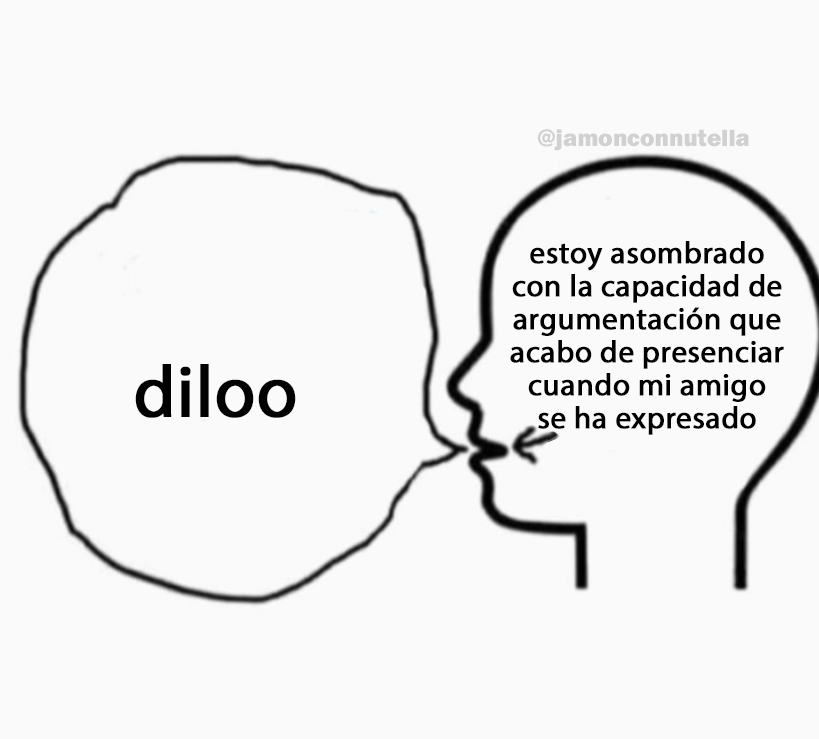
<style>
.page{position:relative;width:819px;height:739px;background:#fafafa}
.page>*{position:absolute;margin:0}
.t1{font:24.5px "FranklinGothic-Heavy";color:#d1d1d1}
.t2{font:31px "MyriadPro-Regular";color:#000000;font-weight:bold}
.t3{font:73.1px "MyriadPro-Regular";color:#000000;font-weight:bold}
</style>
<div class="page">
<p class="t1" style="left:537px;top:129px;width:212px;height:22px">@jamonconnutella</p>
<p class="t2" style="left:510px;top:241px;width:274px;height:194px;text-align:center">estoy asombrado<br>con la capacidad de<br>argumentación que<br>acabo de presenciar<br>cuando mi amigo<br>se ha expresado</p>
<p class="t3" style="left:135px;top:364px;width:161px;height:54px">diloo</p>
</div>
